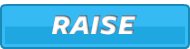
<style>
.page{position:relative;width:190px;height:49px;background:#35baf3}
.page>*{position:absolute;margin:0}
.t1{font:30px "Freight-SansBlackItalic";text-transform:uppercase}
</style>
<div class="page">
<p class="t1" style="left:52px;top:14px;width:85px;height:21px">RAISE</p>
</div>
